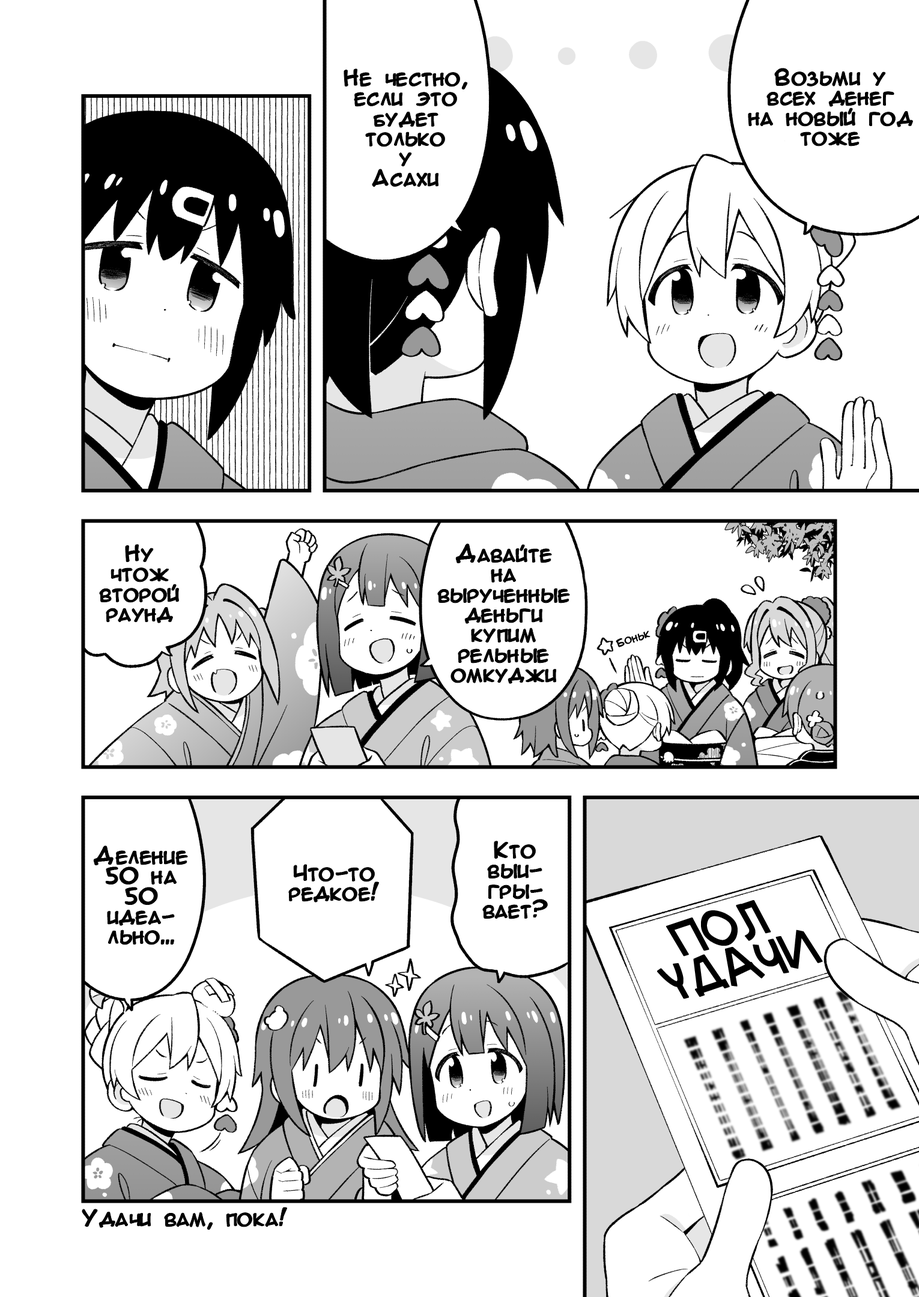
<style>
.page{position:relative;width:919px;height:1297px;background:#ffffff}
.page>*{position:absolute;margin:0}
.t1{font:20px/20px "AnimeAcev3";color:#000000;font-weight:bold}
.t2{font:10px "AnimeAcev3";color:#000000;font-weight:bold}
.t3{font:44.1px/42.5px "Mauryssel";color:#000000;font-weight:bold;scale:0.85 1}
.t4{font:20px "AnimeAcev3";color:#000000;font-weight:bold}
</style>
<div class="page">
<p class="t1" style="left:344px;top:69px;width:123px;height:118px;text-align:center">Не честно,<br>если это<br>будет<br>только<br>у<br>Асахи</p>
<p class="t1" style="left:748px;top:68px;width:165px;height:78px;text-align:center">Возьми у<br>всех денег<br>на новый год<br>тоже</p>
<p class="t1" style="left:100px;top:545px;width:79px;height:78px;text-align:center">Ну<br>чтож<br>второй<br>раунд</p>
<p class="t1" style="left:438px;top:544px;width:131px;height:140px;text-align:center">Давайте<br>на<br>вырученные<br>деньги<br>купим<br>рельные<br>омкуджи</p>
<p class="t2" style="left:616px;top:631px;width:35px;height:17px;rotate:-17deg">Боньк</p>
<p class="t1" style="left:483px;top:842px;width:65px;height:77px;text-align:center">Кто<br>выи-<br>гры-<br>вает?</p>
<p class="t1" style="left:94px;top:846px;width:93px;height:99px;text-align:center">Деление<br>50 на<br>50<br>идеа-<br>льно...</p>
<p class="t1" style="left:289px;top:865px;width:90px;height:37px;text-align:center">Что-то<br>редкое!</p>
<p class="t3" style="left:657px;top:900px;width:166px;height:100px;text-align:center;rotate:-15deg">пол<br>удачи</p>
<p class="t4" style="left:82px;top:1208px;width:205px;height:22px">Удачи вам, пока!</p>
</div>
